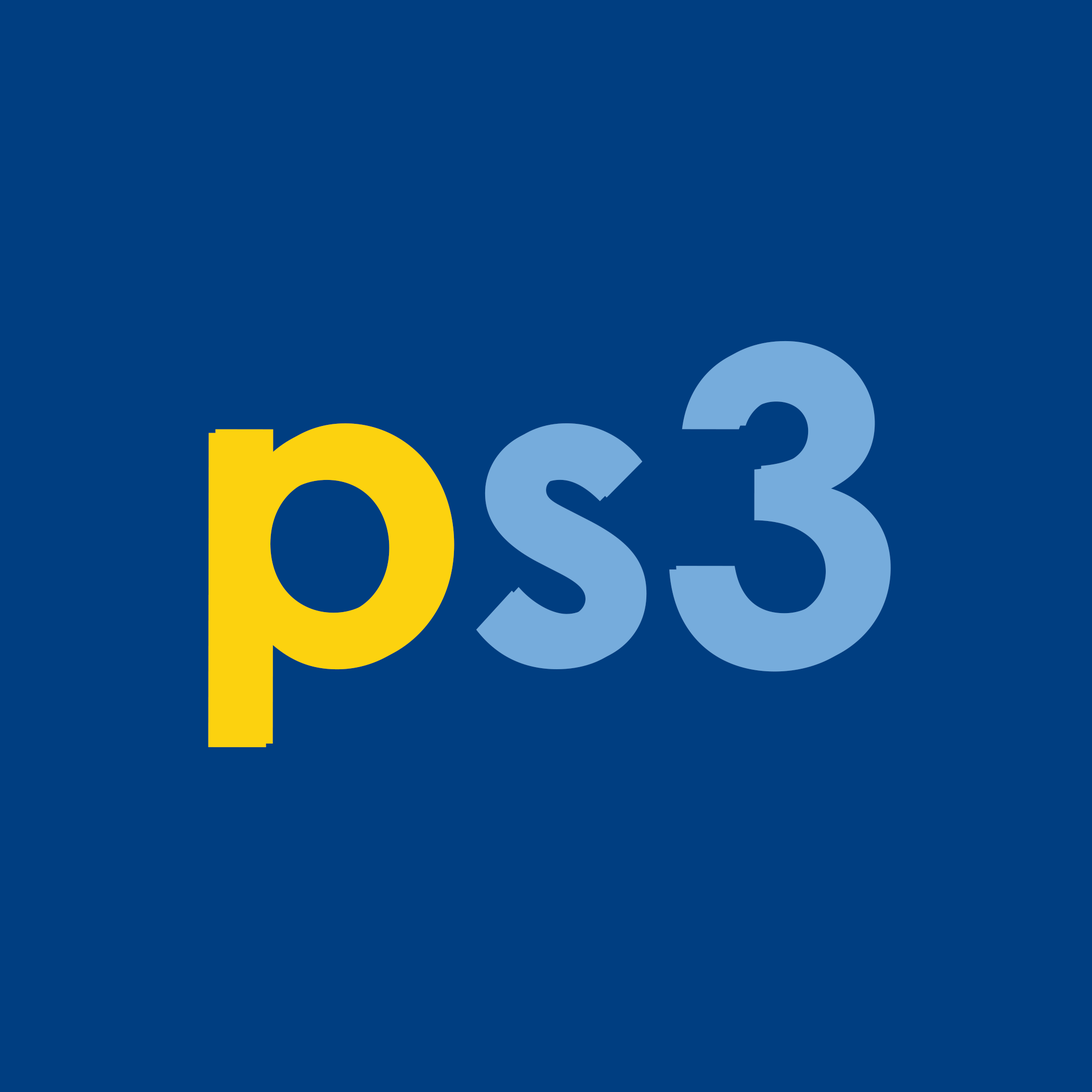
<style>
.page{position:relative;width:1092px;height:1092px;background:#003e81}
.page>*{position:absolute;margin:0}
.t1{font:433.3px "CenturyGothicPro-Bold";color:#76acdc}
.t2{font:433.3px "CenturyGothicPro-Bold";color:#fcd20f}
</style>
<div class="page">
<p class="t1" style="left:215px;top:341px;width:676px;height:403px"><span class="t2">p</span>s3</p>
<p class="t1" style="left:208px;top:344px;width:676px;height:403px"><span class="t2">p</span>s3</p>
</div>
